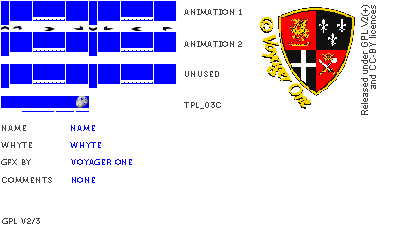
<style>
.page{position:relative;width:400px;height:230px;background:#ffffff}
.page>*{position:absolute;margin:0}
.t1{font:8px "Museo700-Regular";letter-spacing:0.075em;color:#404040;text-transform:uppercase}
.t2{font:8px "Museo700-Regular";letter-spacing:0.075em;color:#0000ff;text-transform:uppercase}
</style>
<div class="page">
<p class="t1" style="left:184px;top:9px;width:58px;height:6px">Animation 1</p>
<p class="t1" style="left:184px;top:41px;width:58px;height:6px">Animation 2</p>
<p class="t1" style="left:185px;top:71px;width:34px;height:6px">unused</p>
<p class="t1" style="left:184px;top:102px;width:37px;height:7px">tpl_03c</p>
<p class="t1" style="left:2px;top:125px;width:24px;height:6px">name</p>
<p class="t2" style="left:71px;top:125px;width:24px;height:6px">name</p>
<p class="t1" style="left:1px;top:142px;width:31px;height:6px">whyte</p>
<p class="t2" style="left:70px;top:142px;width:31px;height:6px">whyte</p>
<p class="t1" style="left:1px;top:159px;width:30px;height:6px">gfx by</p>
<p class="t2" style="left:71px;top:159px;width:61px;height:6px">voyager one</p>
<p class="t1" style="left:2px;top:177px;width:50px;height:6px">comments</p>
<p class="t2" style="left:72px;top:177px;width:23px;height:6px">none</p>
<p class="t1" style="left:2px;top:218px;width:38px;height:6px">gpl v2/3</p>
</div>
